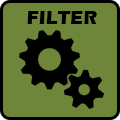
<style>
.page{position:relative;width:120px;height:120px;background:#6f853a}
.page>*{position:absolute;margin:0}
.t1{font:20px "ErasITC-Bold";color:#000000}
</style>
<div class="page">
<p class="t1" style="left:27px;top:11px;width:70px;height:13px">FILTER</p>
</div>
